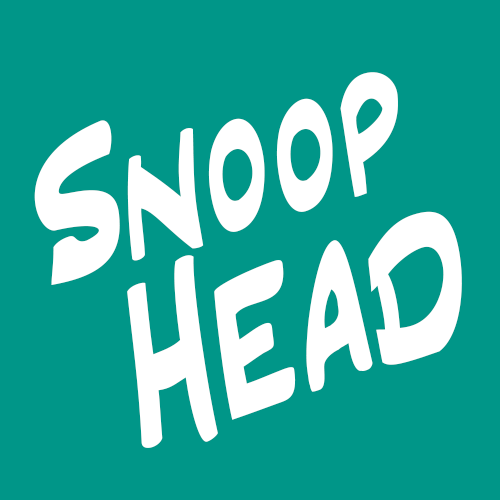
<style>
.page{position:relative;width:500px;height:500px;background:#009688}
.page>*{position:absolute;margin:0}
.t1{font:203.9px "Inkpen2ScriptStd";color:#ffffff;font-style:italic}
.t2{font:248px "Inkpen2ScriptStd";color:#ffffff;font-style:italic}
</style>
<div class="page">
<p class="t1" style="left:34px;top:72px;width:364px;height:213px;rotate:-16deg">Snoop</p>
<p class="t2" style="left:127px;top:211px;width:335px;height:237px;rotate:-18deg">Head</p>
</div>
